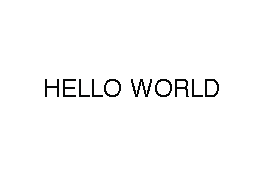
<style>
.page{position:relative;width:264px;height:176px;background:#ffffff}
.page>*{position:absolute;margin:0}
.t1{font:23.9px "Helvetica";color:#060808}
</style>
<div class="page">
<p class="t1" style="left:45px;top:79px;width:174px;height:18px">HELLO WORLD</p>
</div>
